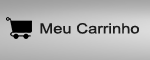
<style>
.page{position:relative;width:150px;height:60px}
.page>*{position:absolute;margin:0}
.t1{font:14px "ArialMT";color:#212121;scale:1.18 1}
</style>
<div class="page">
<p class="t1" style="left:40px;top:23px;width:99px;height:11px">Meu Carrinho</p>
</div>
